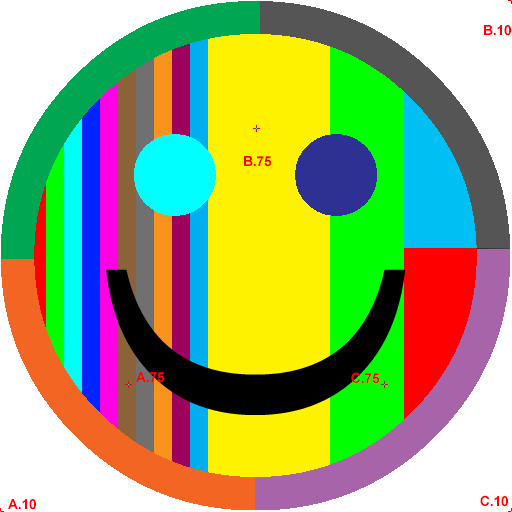
<style>
.page{position:relative;width:512px;height:512px;background:#ffffff}
.page>*{position:absolute;margin:0}
.t1{font:14px "Arial-BoldMT";letter-spacing:-0.02em;color:#ff0000}
</style>
<div class="page">
<p class="t1" style="left:484px;top:25px;width:27px;height:11px">B.10</p>
<p class="t1" style="left:244px;top:156px;width:28px;height:11px">B.75</p>
<p class="t1" style="left:136px;top:372px;width:29px;height:11px">A.75</p>
<p class="t1" style="left:351px;top:372px;width:29px;height:12px">C.75</p>
<p class="t1" style="left:480px;top:495px;width:28px;height:12px">C.10</p>
<p class="t1" style="left:8px;top:499px;width:28px;height:11px">A.10</p>
</div>
